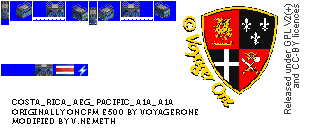
<style>
.page{position:relative;width:328px;height:132px;background:#ffffff}
.page>*{position:absolute;margin:0}
.t1{font:8px "Museo700-Regular";letter-spacing:0.075em;color:#000000;text-transform:uppercase}
</style>
<div class="page">
<p class="t1" style="left:12px;top:99px;width:186px;height:25px">Costa_Rica_AEG_Pacific_A1A_A1A<br>originally oncfm e500 by voyagerone<br>modified by v.nemeth</p>
</div>
